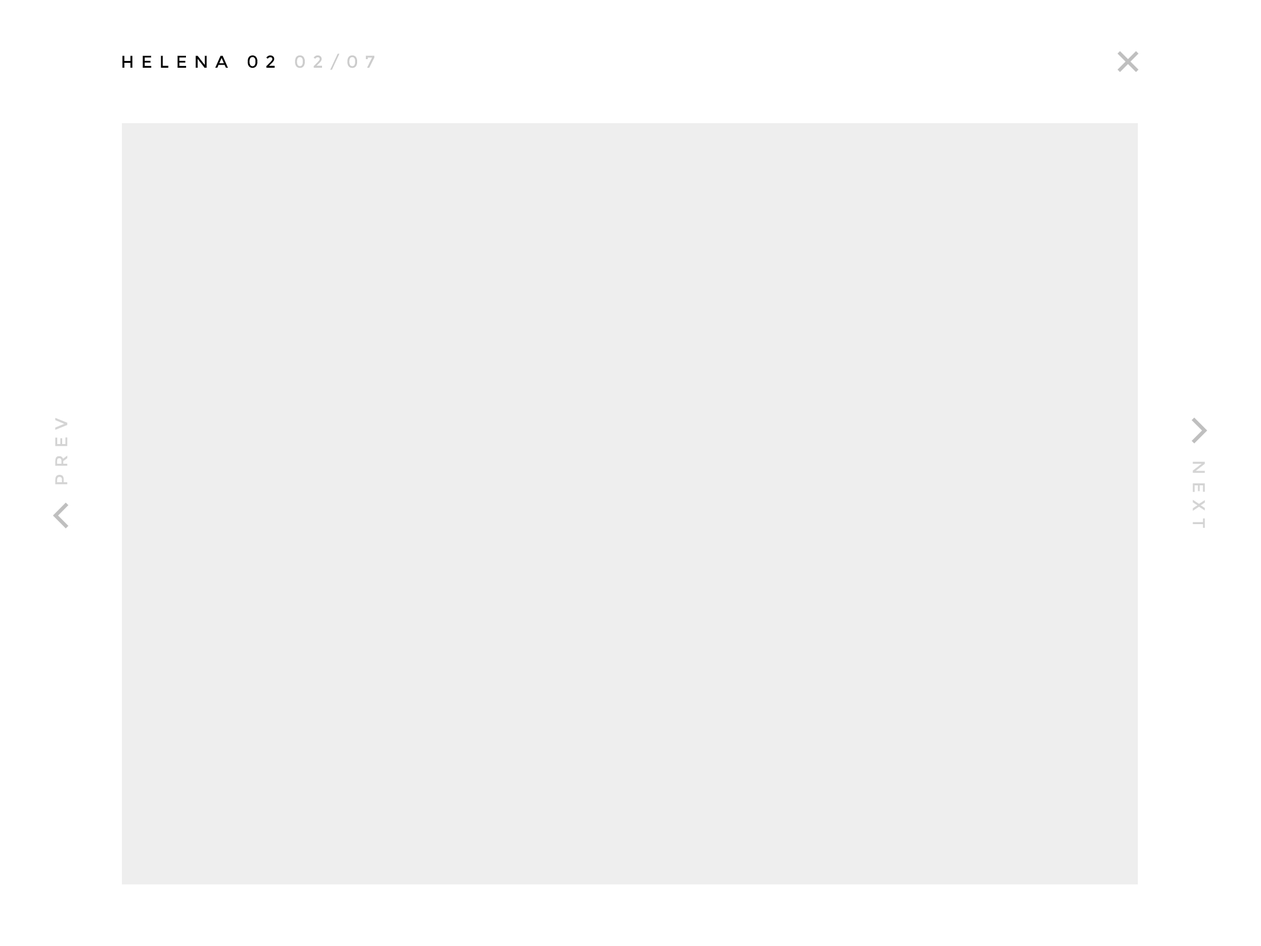
<style>
.page{position:relative;width:1261px;height:946px;background:#eeeeee}
.page>*{position:absolute;margin:0}
.t1{font:17.2px "Montserrat-Regular";letter-spacing:0.4em;color:#000000;text-transform:uppercase}
.t2{font:17.2px "Montserrat-Regular";letter-spacing:0.4em;color:#cccccc;text-transform:uppercase}
.t3{font:17.1px "Montserrat-Regular";letter-spacing:0.4em;color:#d4d4d4;text-transform:uppercase}
.t4{font:17.2px "Montserrat-Regular";letter-spacing:0.4em;color:#d4d4d4;text-transform:uppercase}
</style>
<div class="page">
<p class="t1" style="left:122px;top:54px;width:252px;height:16px">HELENA 02 <span class="t2">02/07</span></p>
<p class="t3" style="left:55px;top:417px;width:13px;height:68px;rotate:-90deg">PREV</p>
<p class="t4" style="left:1193px;top:461px;width:12px;height:67px;rotate:90deg">NEXT</p>
</div>
